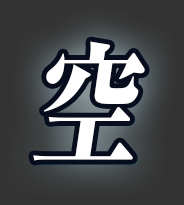
<style>
.page{position:relative;width:184px;height:205px;background:#333333}
.page>*{position:absolute;margin:0}
.t1{font:131.3px "RyuminPro-Heavy";letter-spacing:0.1em;color:#ffffff;font-style:italic;scale:0.83 1}
</style>
<div class="page">
<p class="t1" style="left:33px;top:41px;width:112px;height:120px">空</p>
</div>
